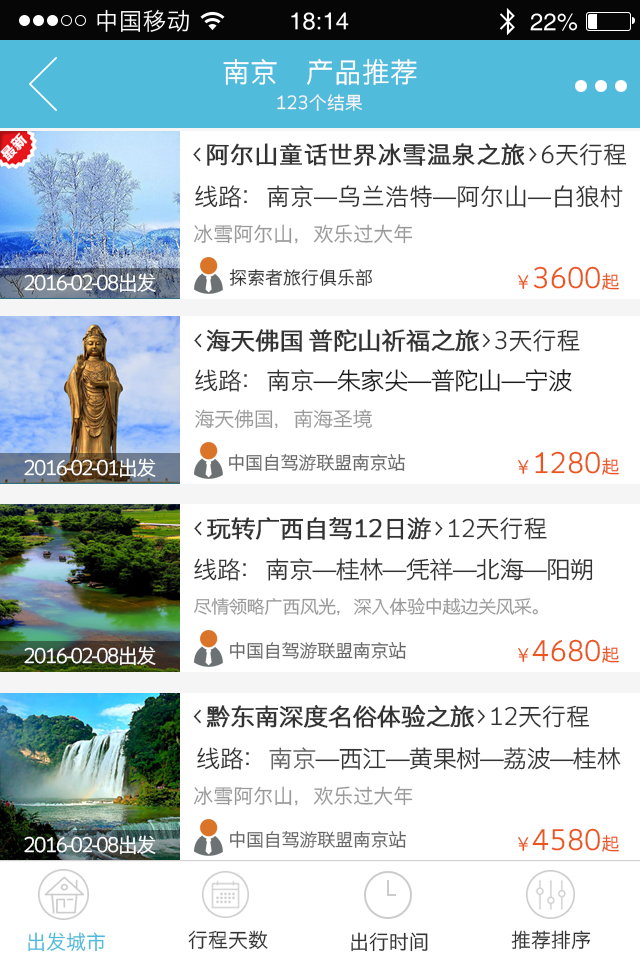
<style>
.page{position:relative;width:640px;height:960px;background:#ffffff}
.page>*{position:absolute;margin:0}
.t1{font:28px "STHeitiSC-Light";color:#ffffff}
.t2{font:18px "STHeitiSC-Light";color:#f7f5f5}
.t3{font:24px "STHeitiSC-Light";color:#333333;font-weight:bold}
.t4{font:24px "STHeitiSC-Light";color:#333333}
.t5{font:20px "STHeitiSC-Light";color:#999999}
.t6{font:18px "STHeitiSC-Light";color:#333333}
.t7{font:28px "STHeitiSC-Light";color:#ea561d}
.t8{font:18px "STHeitiSC-Light";color:#ea561d}
.t9{font:20px "STHeitiSC-Light";letter-spacing:-0.08em;color:#ffffff}
.t10{font:24px "STHeitiSC-Light";letter-spacing:-0.04em;color:#333333;font-weight:bold;scale:1.03 1}
.t11{font:24px "STHeitiSC-Light";letter-spacing:-0.04em;color:#1b1b1b;scale:1.03 1}
.t12{font:24px "STHeitiSC-Light";letter-spacing:-0.04em;color:#333333;scale:1.03 1}
.t13{font:20px "STHeitiSC-Light";letter-spacing:-0.04em;color:#999999;scale:1.03 1}
.t14{font:18px "STHeitiSC-Light";letter-spacing:-0.04em;color:#666666;scale:1.03 1}
.t15{font:18px "STHeitiSC-Light";letter-spacing:-0.04em;color:#999999;scale:1.03 1}
.t16{font:24px "STHeitiSC-Light";letter-spacing:-0.04em;color:#666666;scale:1.03 1}
.t17{font:20px "STHeitiSC-Light";color:#50bbdb}
.t18{font:20px "STHeitiSC-Light";color:#333333}
</style>
<div class="page">
<p class="t1" style="left:223px;top:58px;width:194px;height:27px">南京     产品推荐</p>
<p class="t2" style="left:277px;top:94px;width:85px;height:17px">123个结果</p>
<p class="t3" style="left:193px;top:143px;width:434px;height:23px"><span class="t4">&lt;</span>阿尔山童话世界冰雪温泉之旅<span class="t4">&gt;6天行程</span></p>
<p class="t4" style="left:195px;top:185px;width:428px;height:23px">线路：南京—乌兰浩特—阿尔山—白狼村</p>
<p class="t5" style="left:194px;top:224px;width:219px;height:20px">冰雪阿尔山，欢乐过大年</p>
<p class="t6" style="left:229px;top:269px;width:143px;height:17px">探索者旅行俱乐部</p>
<p class="t7" style="left:518px;top:266px;width:101px;height:24px"><span class="t8">￥</span>3600<span class="t8">起</span></p>
<p class="t9" style="left:24px;top:273px;width:132px;height:20px">2016-02-08出发</p>
<p class="t10" style="left:194px;top:329px;width:386px;height:23px"><span class="t4">&lt;</span>海天佛国 普陀山祈福之旅<span class="t4">&gt;3天行程</span></p>
<p class="t11" style="left:195px;top:369px;width:377px;height:23px"><span class="t4">线路：</span><span class="t12">南京</span>—朱家尖—普陀山—宁波</p>
<p class="t13" style="left:195px;top:409px;width:177px;height:20px">海天佛国，南海圣境</p>
<p class="t9" style="left:24px;top:458px;width:132px;height:20px">2016-02-01出发</p>
<p class="t14" style="left:229px;top:453px;width:176px;height:18px">中国自驾游联盟南京站</p>
<p class="t7" style="left:518px;top:451px;width:101px;height:24px"><span class="t8">￥</span>1280<span class="t8">起</span></p>
<p class="t10" style="left:194px;top:517px;width:353px;height:23px"><span class="t4">&lt;</span>玩转广西自驾12日游<span class="t4">&gt;12天行程</span></p>
<p class="t12" style="left:194px;top:558px;width:399px;height:23px"><span class="t4">线路：</span>南京—桂林—凭祥—北海—阳朔</p>
<p class="t15" style="left:194px;top:597px;width:344px;height:19px">尽情领略广西风光，深入体验中越边关风采。</p>
<p class="t14" style="left:230px;top:641px;width:176px;height:18px">中国自驾游联盟南京站</p>
<p class="t7" style="left:518px;top:639px;width:101px;height:24px"><span class="t8">￥</span>4680<span class="t8">起</span></p>
<p class="t9" style="left:24px;top:646px;width:132px;height:20px">2016-02-08出发</p>
<p class="t10" style="left:193px;top:704px;width:397px;height:24px"><span class="t4">&lt;</span>黔东南深度名俗体验之旅<span class="t4">&gt;12天行程</span></p>
<p class="t12" style="left:197px;top:747px;width:424px;height:23px"><span class="t4">线路：</span><span class="t16">南京</span>—西江—黄果树—荔波—桂林</p>
<p class="t5" style="left:194px;top:786px;width:219px;height:20px">冰雪阿尔山，欢乐过大年</p>
<p class="t14" style="left:230px;top:830px;width:176px;height:18px">中国自驾游联盟南京站</p>
<p class="t7" style="left:518px;top:828px;width:101px;height:24px"><span class="t8">￥</span>4580<span class="t8">起</span></p>
<p class="t9" style="left:24px;top:835px;width:132px;height:20px">2016-02-08出发</p>
<p class="t17" style="left:28px;top:932px;width:77px;height:20px">出发城市</p>
<p class="t18" style="left:188px;top:930px;width:80px;height:20px">行程天数</p>
<p class="t18" style="left:351px;top:932px;width:77px;height:20px">出行时间</p>
<p class="t18" style="left:511px;top:930px;width:80px;height:20px">推荐排序</p>
</div>
